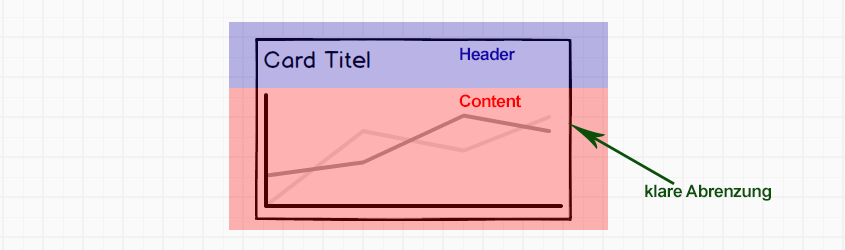
<style>
.page{position:relative;width:845px;height:250px;background:#fafafa}
.page>*{position:absolute;margin:0}
.t1{font:17px "Arial-BoldMT";letter-spacing:-0.02em;color:#1607a9}
.t2{font:17px "Arial-BoldMT";letter-spacing:-0.02em;color:#ff0000}
.t3{font:17px "Arial-BoldMT";letter-spacing:-0.02em;color:#0b5009}
</style>
<div class="page">
<p class="t1" style="left:460px;top:47px;width:55px;height:14px">Header</p>
<p class="t2" style="left:459px;top:94px;width:62px;height:14px">Content</p>
<p class="t3" style="left:645px;top:184px;width:126px;height:17px">klare Abrenzung</p>
</div>
